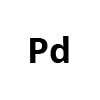
<style>
.page{position:relative;width:100px;height:100px;background:#ffffff}
.page>*{position:absolute;margin:0}
.t1{font:35px "OpenSans-Bold";color:#000000}
</style>
<div class="page">
<p class="t1" style="left:30px;top:36px;width:39px;height:27px">Pd</p>
</div>
